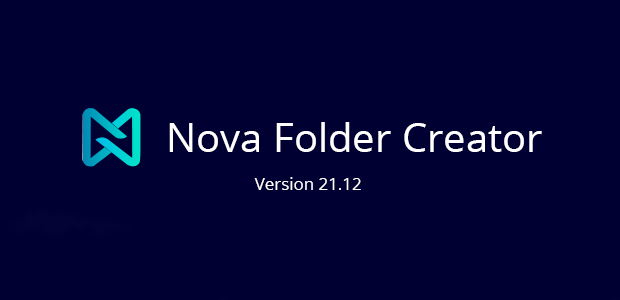
<style>
.page{position:relative;width:620px;height:300px;background:#000033}
.page>*{position:absolute;margin:0}
.t1{font:40px "OpenSans";color:#ffffff}
.t2{font:16.9px "OpenSans";color:#ffffff}
</style>
<div class="page">
<p class="t1" style="left:169px;top:122px;width:373px;height:30px">Nova Folder Creator</p>
<p class="t2" style="left:254px;top:177px;width:107px;height:13px">Version 21.12</p>
</div>
